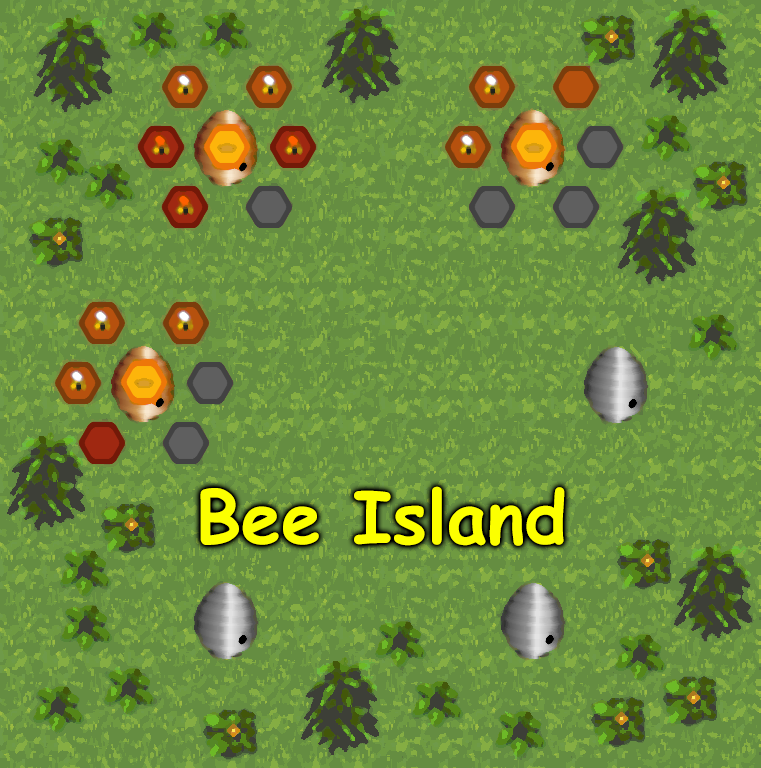
<style>
.page{position:relative;width:761px;height:768px;background:#658d41}
.page>*{position:absolute;margin:0}
.t1{font:72px "ComicSansMS-Bold";color:#fcff00}
</style>
<div class="page">
<p class="t1" style="left:200px;top:486px;width:365px;height:60px">Bee Island</p>
</div>
